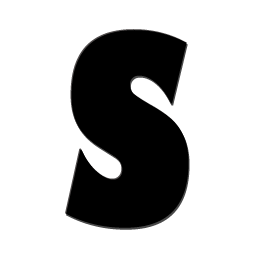
<style>
.page{position:relative;width:256px;height:256px;background:#ffffff}
.page>*{position:absolute;margin:0}
.t1{font:256px "GillSans-UltraBoldCondensed";letter-spacing:-0.01em;color:#000000;font-weight:bold}
</style>
<div class="page">
<p class="t1" style="left:65px;top:29px;width:124px;height:199px">S</p>
</div>
